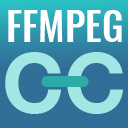
<style>
.page{position:relative;width:128px;height:128px}
.page>*{position:absolute;margin:0}
.t1{font:38.7px "Oswald-Medium";color:#ffffff}
.t2{font:83.7px "HelveticaNeue-Bold";color:#a3e7e5}
.t3{font:95.3px "ArialRoundedMT-Bold";color:#2faba7;scale:0.95 1}
</style>
<div class="page">
<p class="t1" style="left:8px;top:10px;width:114px;height:32px">FFMPEG</p>
<p class="t2" style="left:5px;top:52px;width:118px;height:62px">CC</p>
<p class="t3" style="left:41px;top:76px;width:28px;height:11px">-</p>
<p class="t3" style="left:61px;top:76px;width:28px;height:11px">-</p>
</div>
